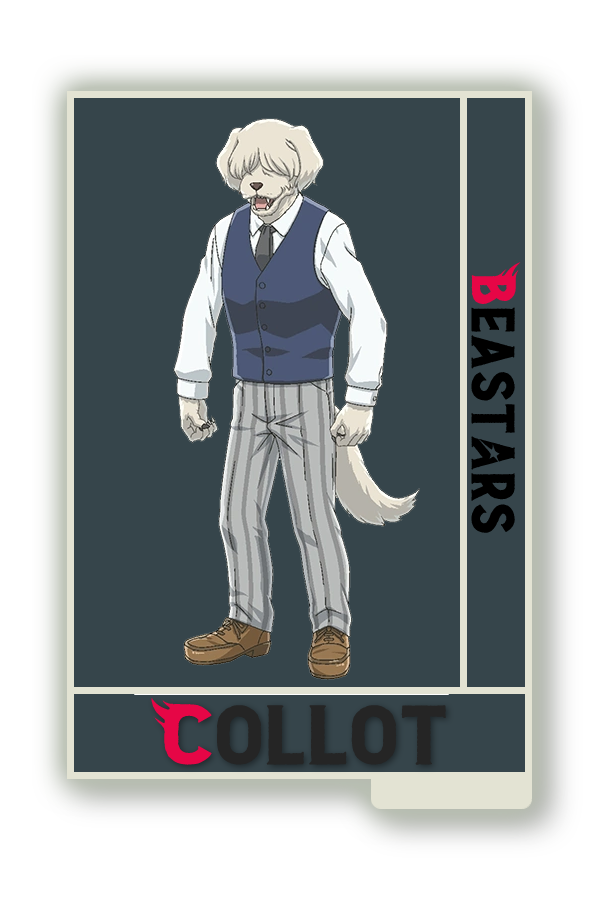
<style>
.page{position:relative;width:600px;height:900px;background:#36454b}
.page>*{position:absolute;margin:0}
.t1{font:48.8px "BEAST";color:#000000}
.t2{font:48.8px "BEAST";color:#e60646}
.t3{font:67px "BEAST";color:#252525;scale:1.12 1}
.t4{font:67px "BEAST";color:#e60646;scale:1.12 1}
</style>
<div class="page">
<p class="t1" style="left:471px;top:262px;width:50px;height:271px;rotate:90deg"><span class="t2">B</span>east@rs</p>
<p class="t3" style="left:151px;top:698px;width:295px;height:67px"><span class="t4">C</span>ollot</p>
</div>
